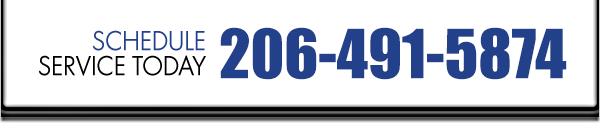
<style>
.page{position:relative;width:600px;height:128px;background:#ffffff}
.page>*{position:absolute;margin:0}
.t1{font:25.6px/24.9px "LuzSans-Book";color:#000000;scale:0.93 1}
.t2{font:25.6px/24.9px "LuzSans-Book";color:#23408b;scale:0.93 1}
.t3{font:62.8px "Impact";color:#23408b}
</style>
<div class="page">
<p class="t1" style="left:38px;top:30px;width:168px;height:46px;text-align:right"><span class="t2">SCHEDULE<br></span>SERVICE TODAY</p>
<p class="t3" style="left:220px;top:27px;width:347px;height:53px">206-491-5874</p>
</div>
